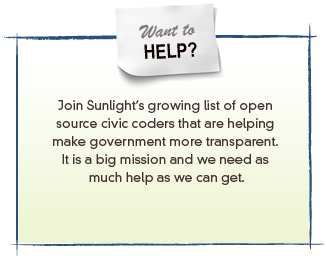
<style>
.page{position:relative;width:325px;height:260px;background:#ffffff}
.page>*{position:absolute;margin:0}
.t1{font:21px "BrushScriptMT";color:#807777}
.t2{font:20px "ArialNarrow-Bold";color:#0f0000}
.t3{font:13px/18px "DINNeuzeitGroteskStd-Light";color:#443330}
</style>
<div class="page">
<p class="t1" style="left:139px;top:24px;width:56px;height:15px;rotate:-3deg">Want to</p>
<p class="t2" style="left:144px;top:42px;width:53px;height:17px;rotate:-3deg">HELP?</p>
<p class="t3" style="left:53px;top:100px;width:225px;height:85px;text-align:center">Join Sunlight’s growing list of open <br>source civic coders that are helping <br>make government more transparent. <br>It is a big mission and we need as <br>much help as we can get.</p>
</div>
